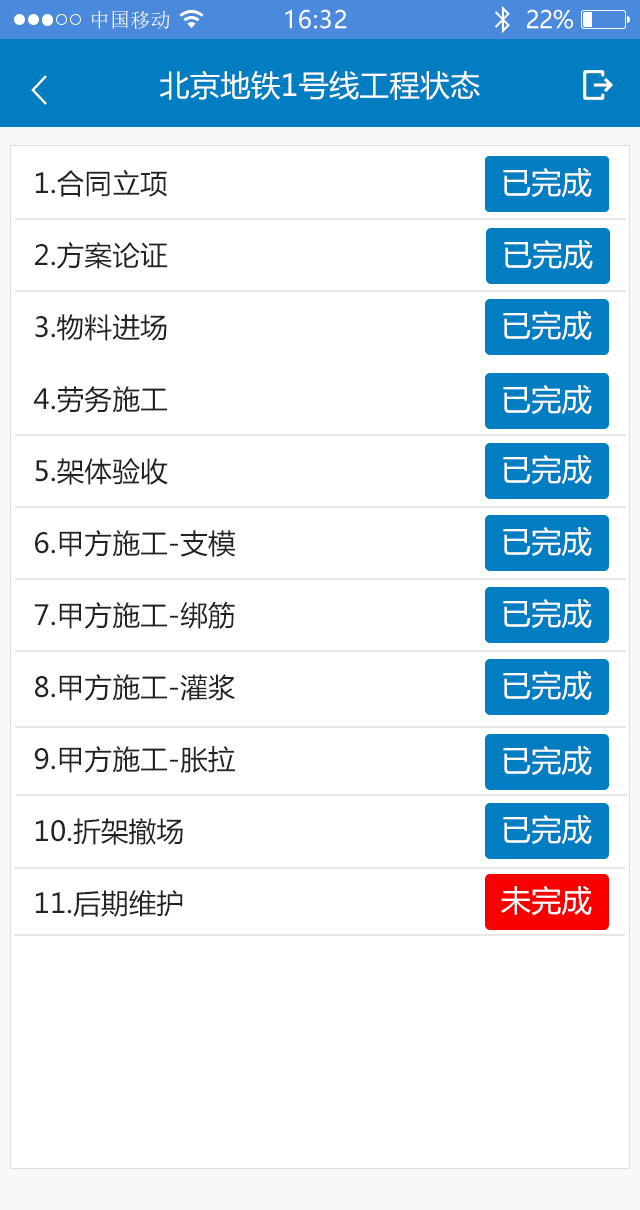
<style>
.page{position:relative;width:640px;height:1210px;background:#ffffff}
.page>*{position:absolute;margin:0}
.t1{font:20px "SimSun";letter-spacing:0.02em;color:#ffffff}
.t2{font:24px "MicrosoftYaHei";letter-spacing:0.025em;color:#ffffff}
.t3{font:24px "MicrosoftYaHei";letter-spacing:-0.02em;color:#ffffff}
.t4{font:30px "MicrosoftYaHei";letter-spacing:0.01em;color:#ffffff}
.t5{font:27.5px/72px "MicrosoftYaHei";letter-spacing:0.01em;color:#232322}
</style>
<div class="page">
<p class="t1" style="left:92px;top:10px;width:78px;height:19px">中国移动</p>
<p class="t2" style="left:285px;top:9px;width:62px;height:20px">16:32</p>
<p class="t3" style="left:527px;top:9px;width:46px;height:20px">22%</p>
<p class="t4" style="left:160px;top:70px;width:320px;height:30px">北京地铁1号线工程状态</p>
<p class="t5" style="left:33px;top:169px;width:203px;height:748px">1.合同立项<br>2.方案论证<br>3.物料进场<br>4.劳务施工<br>5.架体验收<br>6.甲方施工-支模<br>7.甲方施工-绑筋<br>8.甲方施工-灌浆<br>9.甲方施工-胀拉<br>10.折架撤场<br>11.后期维护</p>
<p class="t4" style="left:503px;top:168px;width:89px;height:29px">已完成</p>
<p class="t4" style="left:503px;top:168px;width:89px;height:29px">已完成</p>
<p class="t4" style="left:503px;top:168px;width:89px;height:29px">已完成</p>
<p class="t4" style="left:504px;top:240px;width:89px;height:29px">已完成</p>
<p class="t4" style="left:503px;top:311px;width:89px;height:29px">已完成</p>
<p class="t4" style="left:503px;top:385px;width:89px;height:29px">已完成</p>
<p class="t4" style="left:503px;top:455px;width:89px;height:29px">已完成</p>
<p class="t4" style="left:503px;top:527px;width:89px;height:29px">已完成</p>
<p class="t4" style="left:503px;top:599px;width:89px;height:29px">已完成</p>
<p class="t4" style="left:503px;top:671px;width:89px;height:29px">已完成</p>
<p class="t4" style="left:503px;top:746px;width:89px;height:29px">已完成</p>
<p class="t4" style="left:503px;top:815px;width:89px;height:29px">已完成</p>
<p class="t4" style="left:501px;top:886px;width:91px;height:29px">未完成</p>
</div>
